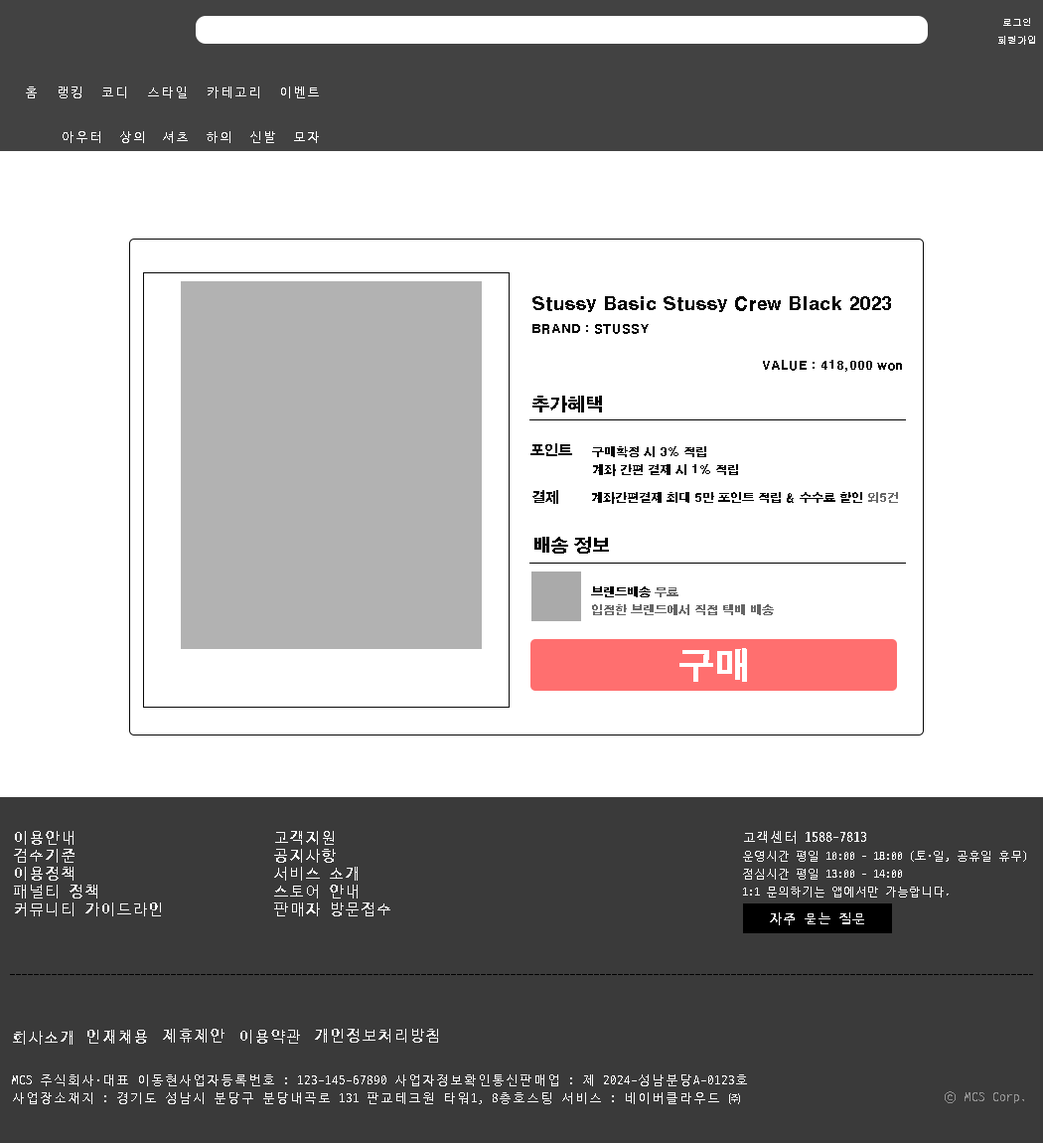
<style>
.page{position:relative;width:1043px;height:1143px;background:#ffffff}
.page>*{position:absolute;margin:0}
.t1{font:9.9px "Gulim";color:#ffffff}
.t2{font:12.9px "D2Coding";color:#ffffff}
.t3{font:17.9px "H2gtrE";color:#080808}
.t4{font:11.9px "H2gtrE";color:#080808}
.t5{font:13.9px "H2gtrE";color:#080808}
.t6{font:11.9px/17.9px "H2gtrE";color:#080808}
.t7{font:11.9px "H2gtrE";color:#666666}
.t8{font:17.9px "H2gtrE";color:#000000}
.t9{font:11.9px/17.9px "H2gtrE";color:#666666}
.t10{font:11.9px/17.9px "H2gtrE";color:#000000}
.t11{font:35.8px "H2gtrE";color:#ffffff}
.t12{font:15.9px/17.9px "D2CodingBold";color:#fafafa}
.t13{font:11.9px/17.9px "D2Coding";color:#fafafa}
.t14{font:13.9px/17.9px "D2CodingBold";color:#fafafa}
.t15{font:13.9px "D2CodingBold";color:#fafafa}
.t16{font:15.9px "D2CodingBold";color:#fafafa}
.t17{font:12.9px/17.9px "D2Coding";color:#fafafa}
.t18{font:12.9px "D2Coding";color:#919191}
</style>
<div class="page">
<p class="t1" style="left:1004px;top:18px;width:27px;height:8px">로그인</p>
<p class="t1" style="left:999px;top:36px;width:36px;height:9px">회원가입</p>
<p class="t2" style="left:26px;top:86px;width:11px;height:12px">홈</p>
<p class="t2" style="left:59px;top:86px;width:22px;height:12px">랭킹</p>
<p class="t2" style="left:102px;top:86px;width:24px;height:12px">코디</p>
<p class="t2" style="left:148px;top:86px;width:39px;height:12px">스타일</p>
<p class="t2" style="left:208px;top:86px;width:51px;height:12px">카테고리</p>
<p class="t2" style="left:281px;top:86px;width:38px;height:12px">이벤트</p>
<p class="t2" style="left:63px;top:131px;width:37px;height:12px">아우터</p>
<p class="t2" style="left:120px;top:131px;width:24px;height:12px">상의</p>
<p class="t2" style="left:163px;top:131px;width:25px;height:12px">셔츠</p>
<p class="t2" style="left:207px;top:131px;width:24px;height:12px">하의</p>
<p class="t2" style="left:250px;top:131px;width:25px;height:12px">신발</p>
<p class="t2" style="left:294px;top:131px;width:25px;height:12px">모자</p>
<p class="t3" style="left:533px;top:296px;width:358px;height:16px">Stussy Basic Stussy Crew Black 2023</p>
<p class="t4" style="left:533px;top:324px;width:116px;height:10px">BRAND : STUSSY</p>
<p class="t4" style="left:763px;top:360px;width:139px;height:12px">VALUE : 418,000 won</p>
<p class="t3" style="left:533px;top:396px;width:69px;height:16px">추가혜택</p>
<p class="t5" style="left:531px;top:443px;width:41px;height:13px">포인트</p>
<p class="t6" style="left:592px;top:446px;width:146px;height:30px">구매확정 시 3% 적립<br>계좌 간편 결제 시 1% 적립</p>
<p class="t5" style="left:533px;top:490px;width:25px;height:14px">결제</p>
<p class="t4" style="left:592px;top:492px;width:306px;height:12px">계좌간편결제 최대 5만 포인트 적립 &amp; 수수료 할인 <span class="t7">외5건</span></p>
<p class="t8" style="left:535px;top:537px;width:74px;height:17px">배송 정보</p>
<p class="t9" style="left:591px;top:586px;width:183px;height:29px"><span class="t10">브랜드배송 </span>무료<br>입점한 브랜드에서 직접 택배 배송</p>
<p class="t11" style="left:680px;top:648px;width:67px;height:34px">구매</p>
<p class="t12" style="left:14px;top:831px;width:147px;height:85px">이용안내<br>검수기준<br>이용정책<br>패널티 정책<br>커뮤니티 가이드라인</p>
<p class="t12" style="left:274px;top:831px;width:117px;height:85px">고객지원<br>공지사항<br>서비스 소개<br>스토어 안내<br>판매자 방문접수</p>
<p class="t13" style="left:743px;top:831px;width:284px;height:66px"><span class="t14">고객센터 1588-7813<br></span>운영시간 평일 10:00 - 18:00 (토·일, 공휴일 휴무)<br>점심시간 평일 13:00 - 14:00<br>1:1 문의하기는 앱에서만 가능합니다.</p>
<p class="t15" style="left:770px;top:912px;width:95px;height:13px">자주 묻는 질문</p>
<p class="t16" style="left:13px;top:1031px;width:60px;height:13px">회사소개</p>
<p class="t16" style="left:87px;top:1030px;width:60px;height:13px">인재채용</p>
<p class="t16" style="left:163px;top:1029px;width:62px;height:13px">제휴제안</p>
<p class="t16" style="left:240px;top:1030px;width:60px;height:13px">이용약관</p>
<p class="t16" style="left:315px;top:1029px;width:123px;height:13px">개인정보처리방침</p>
<p class="t17" style="left:12px;top:1074px;width:735px;height:30px">MCS 주식회사·대표 이동현사업자등록번호 : 123-145-67890 사업자정보확인통신판매업 : 제 2024-성남분당A-0123호<br>사업장소재지 : 경기도 성남시 분당구 분당내곡로 131 판교테크원 타워1, 8층호스팅 서비스 : 네이버클라우드 ㈜</p>
<p class="t18" style="left:945px;top:1091px;width:80px;height:12px">ⓒ MCS Corp.</p>
</div>
